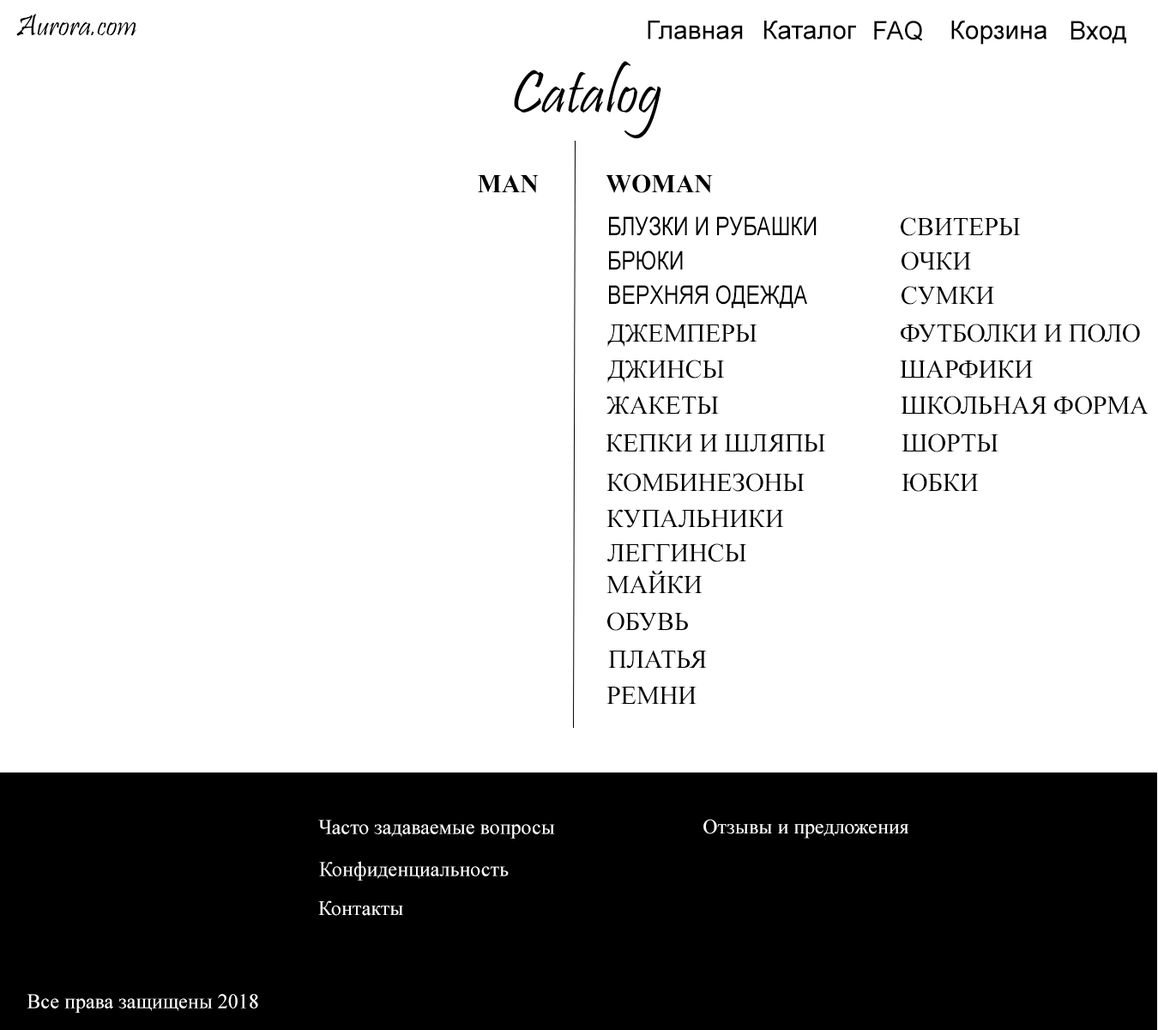
<style>
.page{position:relative;width:1158px;height:1030px;background:#ffffff}
.page>*{position:absolute;margin:0}
.t1{font:30.9px "Pristina-Regular";color:#000000}
.t2{font:25.7px "ArialMT";color:#000000}
.t3{font:61.8px "Pristina-Regular";color:#000000}
.t4{font:25.7px "TimesNewRomanPS-BoldMT";color:#000000}
.t5{font:25.7px "ArialNarrow";color:#000000}
.t6{font:25.7px "TimesNewRomanPSMT";color:#000000}
.t7{font:20.6px "TimesNewRomanPSMT";color:#fffefe}
</style>
<div class="page">
<p class="t1" style="left:16px;top:14px;width:120px;height:22px">Aurora.com</p>
<p class="t2" style="left:648px;top:21px;width:95px;height:18px">Главная</p>
<p class="t2" style="left:764px;top:21px;width:92px;height:18px">Каталог</p>
<p class="t2" style="left:874px;top:21px;width:49px;height:20px">FAQ</p>
<p class="t2" style="left:951px;top:21px;width:97px;height:24px">Корзина</p>
<p class="t2" style="left:1071px;top:21px;width:55px;height:23px">Вход</p>
<p class="t3" style="left:514px;top:61px;width:147px;height:78px">Catalog</p>
<p class="t4" style="left:478px;top:174px;width:61px;height:19px">MAN</p>
<p class="t4" style="left:606px;top:174px;width:107px;height:19px">WOMAN</p>
<p class="t5" style="left:609px;top:216px;width:208px;height:20px">БЛУЗКИ И РУБАШКИ</p>
<p class="t6" style="left:901px;top:217px;width:120px;height:19px">СВИТЕРЫ</p>
<p class="t5" style="left:609px;top:251px;width:74px;height:19px">БРЮКИ</p>
<p class="t6" style="left:902px;top:251px;width:69px;height:19px">ОЧКИ</p>
<p class="t5" style="left:609px;top:285px;width:198px;height:23px">ВЕРХНЯЯ ОДЕЖДА</p>
<p class="t6" style="left:902px;top:286px;width:92px;height:19px">СУМКИ</p>
<p class="t6" style="left:607px;top:323px;width:151px;height:24px">ДЖЕМПЕРЫ</p>
<p class="t6" style="left:901px;top:323px;width:239px;height:19px">ФУТБОЛКИ И ПОЛО</p>
<p class="t6" style="left:607px;top:359px;width:117px;height:24px">ДЖИНСЫ</p>
<p class="t6" style="left:900px;top:359px;width:133px;height:18px">ШАРФИКИ</p>
<p class="t6" style="left:607px;top:396px;width:112px;height:18px">ЖАКЕТЫ</p>
<p class="t6" style="left:901px;top:396px;width:248px;height:18px">ШКОЛЬНАЯ ФОРМА</p>
<p class="t6" style="left:606px;top:433px;width:219px;height:19px">КЕПКИ И ШЛЯПЫ</p>
<p class="t6" style="left:902px;top:433px;width:97px;height:19px">ШОРТЫ</p>
<p class="t6" style="left:607px;top:473px;width:198px;height:19px">КОМБИНЕЗОНЫ</p>
<p class="t6" style="left:902px;top:473px;width:77px;height:19px">ЮБКИ</p>
<p class="t6" style="left:607px;top:509px;width:177px;height:19px">КУПАЛЬНИКИ</p>
<p class="t6" style="left:607px;top:543px;width:139px;height:19px">ЛЕГГИНСЫ</p>
<p class="t6" style="left:607px;top:570px;width:96px;height:23px">МАЙКИ</p>
<p class="t6" style="left:607px;top:612px;width:81px;height:19px">ОБУВЬ</p>
<p class="t6" style="left:608px;top:649px;width:99px;height:19px">ПЛАТЬЯ</p>
<p class="t6" style="left:607px;top:686px;width:90px;height:18px">РЕМНИ</p>
<p class="t7" style="left:318px;top:819px;width:237px;height:19px">Часто задаваемые вопросы</p>
<p class="t7" style="left:704px;top:818px;width:205px;height:20px">Отзывы и предложения</p>
<p class="t7" style="left:319px;top:861px;width:190px;height:19px">Конфиденциальность</p>
<p class="t7" style="left:318px;top:900px;width:85px;height:15px">Контакты</p>
<p class="t7" style="left:27px;top:994px;width:231px;height:18px">Все права защищены 2018</p>
</div>
